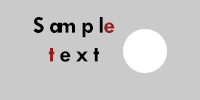
<style>
.page{position:relative;width:200px;height:100px;background:#cacaca}
.page>*{position:absolute;margin:0}
.t1{font:24px "TwCenMT-Bold";letter-spacing:0.2em;color:#000000}
.t2{font:24px "TwCenMT-Bold";letter-spacing:0.2em;color:#9b1c1c}
</style>
<div class="page">
<p class="t1" style="left:33px;top:17px;width:82px;height:45px;text-align:center">Sampl<span class="t2">e <br>t</span>ext</p>
</div>
